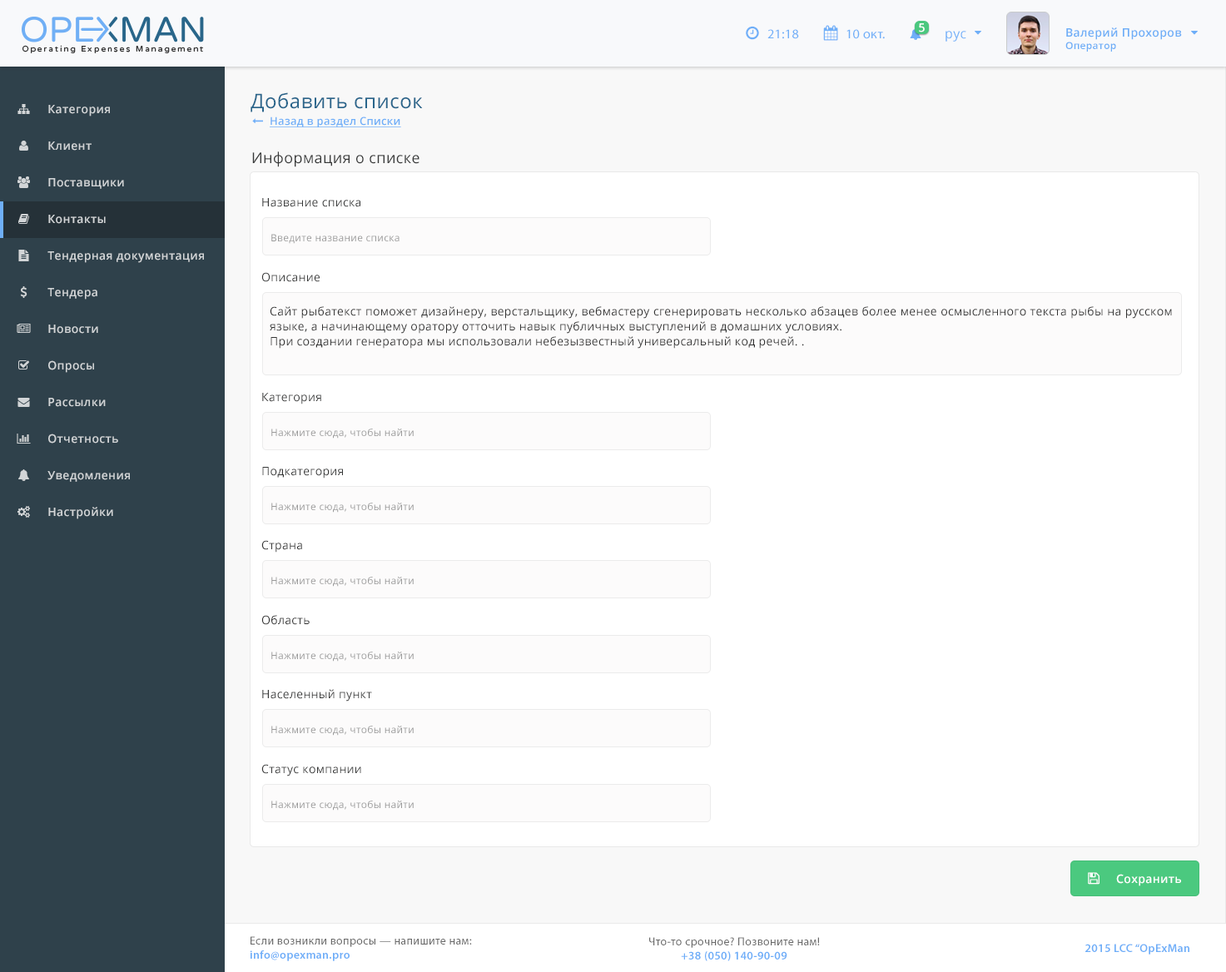
<style>
.page{position:relative;width:1226px;height:972px;background:#ffffff}
.page>*{position:absolute;margin:0}
.t1{font:13.3px "MyriadPro-Regular";letter-spacing:0.025em;color:#6faff8}
.t2{font:11.6px "OpenSans-Semibold";letter-spacing:0.025em;color:#ffffff}
.t3{font:11.6px "OpenSans-Semibold";letter-spacing:0.025em;color:#6eaef7}
.t4{font:10px "OpenSans-Semibold";letter-spacing:0.025em;color:#6eaef7}
.t5{font:13.3px "OpenSans";letter-spacing:0.025em;color:#6eaff8}
.t6{font:19.9px "OpenSans";letter-spacing:0.025em;color:#29658b}
.t7{font:11.6px "OpenSans-Semibold";letter-spacing:0.025em;color:#d2d5d7}
.t8{font:10.8px "OpenSans-Semibold";letter-spacing:0.025em;color:#6faff8;text-decoration:underline}
.t9{font:14.9px "OpenSans";letter-spacing:0.025em;color:#373838}
.t10{font:11.6px "OpenSans";letter-spacing:0.025em;color:#373838}
.t11{font:10px "OpenSans";letter-spacing:0.025em;color:#999999}
.t12{font:11.6px/14.9px "OpenSans";letter-spacing:0.025em;color:#333333}
.t13{font:11.6px "OpenSans";letter-spacing:0.025em;color:#333333}
.t14{font:11.6px "MyriadPro-Regular";letter-spacing:0.025em;color:#696969}
.t15{font:11.6px "MyriadPro-Semibold";letter-spacing:0.025em;color:#6eaef8}
</style>
<div class="page">
<p class="t1" style="left:768px;top:29px;width:31px;height:10px">21:18</p>
<p class="t1" style="left:847px;top:29px;width:38px;height:10px">10 окт.</p>
<p class="t2" style="left:919px;top:23px;width:6px;height:9px">5</p>
<p class="t3" style="left:1066px;top:27px;width:116px;height:25px">Валерий Прохоров<br><span class="t4">Оператор</span></p>
<p class="t5" style="left:946px;top:31px;width:21px;height:11px">рус</p>
<p class="t6" style="left:251px;top:92px;width:172px;height:20px">Добавить список</p>
<p class="t7" style="left:48px;top:105px;width:62px;height:12px">Категория</p>
<p class="t8" style="left:270px;top:117px;width:131px;height:10px">Назад в раздел Списки</p>
<p class="t7" style="left:48px;top:142px;width:44px;height:9px">Клиент</p>
<p class="t9" style="left:252px;top:152px;width:168px;height:15px">Информация о списке</p>
<p class="t7" style="left:48px;top:178px;width:76px;height:11px">Поставщики</p>
<p class="t10" style="left:262px;top:198px;width:98px;height:9px">Название списка</p>
<p class="t7" style="left:48px;top:215px;width:58px;height:9px">Контакты</p>
<p class="t11" style="left:271px;top:234px;width:129px;height:10px">Введите название списка</p>
<p class="t7" style="left:47px;top:251px;width:157px;height:12px">Тендерная документация</p>
<p class="t10" style="left:261px;top:272px;width:59px;height:10px">Описание</p>
<p class="t7" style="left:47px;top:288px;width:50px;height:12px">Тендера</p>
<p class="t12" style="left:270px;top:306px;width:902px;height:43px;text-align:justify">Сайт рыбатекст поможет дизайнеру, верстальщику, вебмастеру сгенерировать несколько абзацев более менее осмысленного текста рыбы на русском языке, а начинающему оратору отточить навык публичных выступлений в домашних условиях.<br>При создании генератора мы использовали небезызвестный универсальный код речей. .</p>
<p class="t7" style="left:48px;top:325px;width:50px;height:9px">Новости</p>
<p class="t7" style="left:48px;top:360px;width:46px;height:13px">Опросы</p>
<p class="t7" style="left:48px;top:398px;width:58px;height:9px">Рассылки</p>
<p class="t10" style="left:262px;top:393px;width:59px;height:12px">Категория</p>
<p class="t7" style="left:48px;top:434px;width:70px;height:10px">Отчетность</p>
<p class="t11" style="left:271px;top:429px;width:143px;height:10px">Нажмите сюда, чтобы найти</p>
<p class="t7" style="left:47px;top:471px;width:83px;height:11px">Уведомления</p>
<p class="t10" style="left:262px;top:467px;width:81px;height:12px">Подкатегория</p>
<p class="t7" style="left:48px;top:507px;width:65px;height:12px">Настройки</p>
<p class="t11" style="left:271px;top:503px;width:143px;height:10px">Нажмите сюда, чтобы найти</p>
<p class="t13" style="left:261px;top:540px;width:41px;height:13px">Страна</p>
<p class="t11" style="left:271px;top:577px;width:143px;height:10px">Нажмите сюда, чтобы найти</p>
<p class="t13" style="left:261px;top:615px;width:49px;height:10px">Область</p>
<p class="t11" style="left:271px;top:652px;width:143px;height:10px">Нажмите сюда, чтобы найти</p>
<p class="t10" style="left:262px;top:689px;width:110px;height:13px">Населенный пункт</p>
<p class="t11" style="left:271px;top:726px;width:143px;height:10px">Нажмите сюда, чтобы найти</p>
<p class="t10" style="left:261px;top:764px;width:100px;height:13px">Статус компании</p>
<p class="t11" style="left:271px;top:801px;width:143px;height:10px">Нажмите сюда, чтобы найти</p>
<p class="t2" style="left:1116px;top:874px;width:65px;height:13px">Сохранить</p>
<p class="t14" style="left:250px;top:937px;width:222px;height:25px">Если возникли вопросы — напишите нам:<br><span class="t15">info@opexman.pro</span></p>
<p class="t14" style="left:649px;top:937px;width:171px;height:25px;text-align:center">Что-то срочное? Позвоните нам!<br><span class="t15">+38 (050) 140-90-09</span></p>
<p class="t15" style="left:1086px;top:944px;width:104px;height:11px">2015 LCC “OpExMan</p>
</div>
